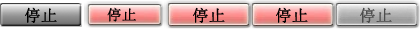
<style>
.page{position:relative;width:420px;height:30px}
.page>*{position:absolute;margin:0}
.t1{font:16px "SimSun";color:#000000;font-weight:bold}
.t2{font:14.4px "SimSun";color:#000000;font-weight:bold}
.t3{font:16px "SimSun";color:#4d4d4d;font-weight:bold}
</style>
<div class="page">
<p class="t1" style="left:25px;top:7px;width:32px;height:16px">停止</p>
<p class="t2" style="left:107px;top:7px;width:29px;height:15px">停止</p>
<p class="t1" style="left:193px;top:7px;width:32px;height:16px">停止</p>
<p class="t1" style="left:276px;top:7px;width:32px;height:16px">停止</p>
<p class="t3" style="left:360px;top:7px;width:32px;height:16px">停止</p>
</div>
